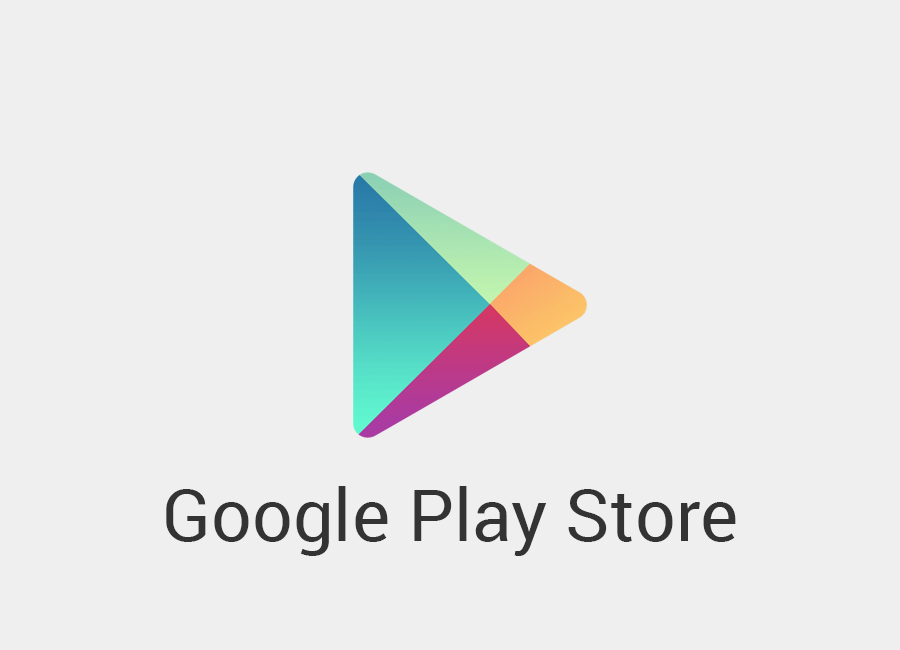
<style>
.page{position:relative;width:900px;height:650px;background:#efefef}
.page>*{position:absolute;margin:0}
.t1{font:72px "Roboto-Regular";color:#333333}
</style>
<div class="page">
<p class="t1" style="left:166px;top:486px;width:570px;height:70px">Google Play Store</p>
</div>
